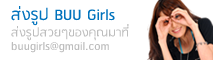
<style>
.page{position:relative;width:213px;height:60px;background:#ffffff}
.page>*{position:absolute;margin:0}
.t1{font:18.6px "RSU";letter-spacing:0.01em;color:#0072bc}
.t2{font:14.1px "RSU";letter-spacing:0.01em;color:#bdbdbd}
.t3{font:13.9px "RSU";letter-spacing:0.01em;color:#bdbdbd}
</style>
<div class="page">
<p class="t1" style="left:11px;top:6px;width:104px;height:20px">ส่งรูป BUU Girls</p>
<p class="t2" style="left:11px;top:24px;width:118px;height:17px">ส่งรูปสวยๆของคุณมาที่</p>
<p class="t3" style="left:11px;top:42px;width:98px;height:11px">buugirls@gmail.com</p>
</div>
